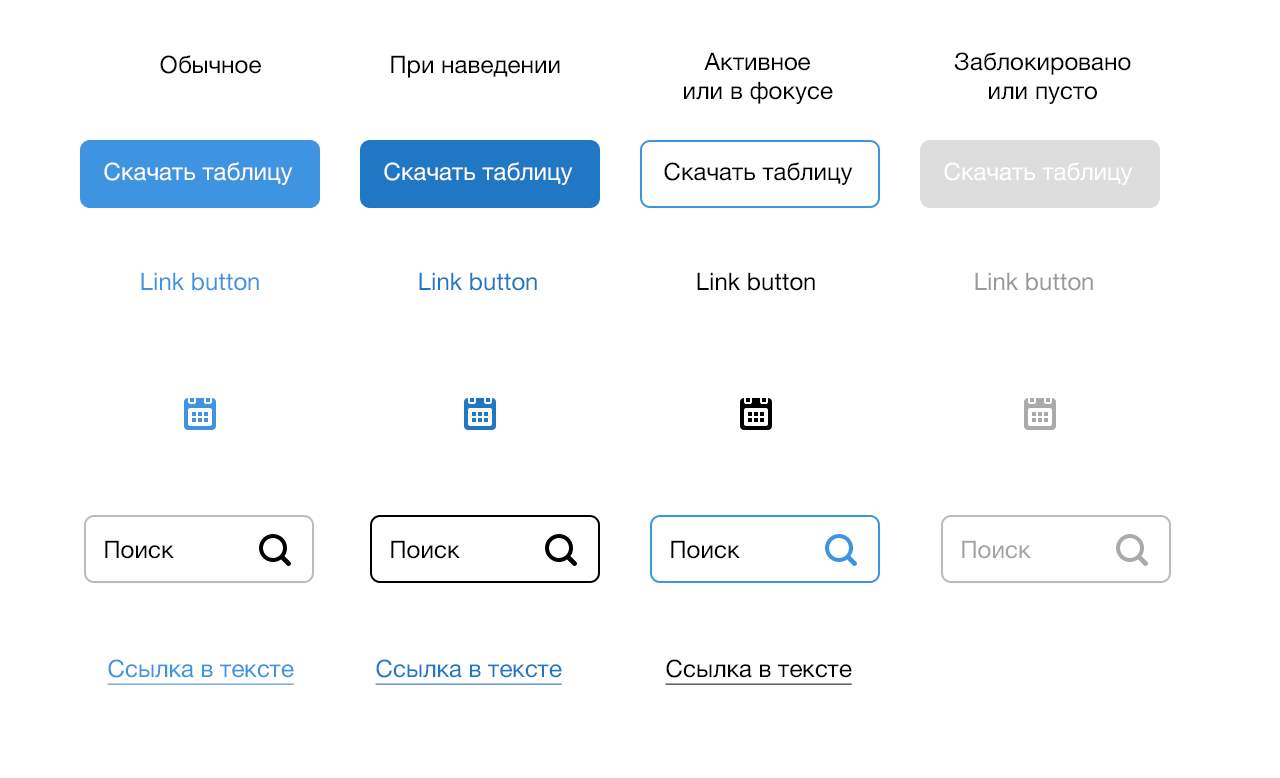
<style>
.page{position:relative;width:1280px;height:778px;background:#ffffff}
.page>*{position:absolute;margin:0}
.t1{font:12px "HelveticaNeue";color:#000000}
.t2{font:12px/40px "HelveticaNeue";color:#ffffff}
.t3{font:12px/40px "HelveticaNeue";color:#000000}
.t4{font:12px "HelveticaNeue";color:#3e94e0}
.t5{font:12px "HelveticaNeue";color:#2077c4}
.t6{font:12px "HelveticaNeue";color:#999999}
.t7{font:12px "HelveticaNeue";color:#a3a3a3}
.t8{font:12px "HelveticaNeue";color:#3e94e0;text-decoration:underline}
.t9{font:12px "HelveticaNeue";color:#2077c4;text-decoration:underline}
.t10{font:12px "HelveticaNeue";color:#000000;text-decoration:underline}
</style>
<div class="page">
<p class="t1" style="left:684px;top:52px;width:149px;height:52px;text-align:center">Активное<br>или в фокусе</p>
<p class="t1" style="left:954px;top:52px;width:177px;height:52px;text-align:center">Заблокировано<br>или пусто</p>
<p class="t1" style="left:160px;top:55px;width:101px;height:19px">Обычное</p>
<p class="t1" style="left:391px;top:55px;width:169px;height:23px">При наведении</p>
<p class="t2" style="left:104px;top:162px;width:189px;height:23px">Скачать таблицу</p>
<p class="t2" style="left:384px;top:162px;width:189px;height:23px">Скачать таблицу</p>
<p class="t3" style="left:664px;top:162px;width:189px;height:23px">Скачать таблицу</p>
<p class="t2" style="left:944px;top:162px;width:189px;height:23px">Скачать таблицу</p>
<p class="t4" style="left:141px;top:272px;width:118px;height:19px">Link button</p>
<p class="t5" style="left:419px;top:272px;width:118px;height:19px">Link button</p>
<p class="t1" style="left:697px;top:272px;width:118px;height:19px">Link button</p>
<p class="t6" style="left:975px;top:272px;width:118px;height:19px">Link button</p>
<p class="t1" style="left:105px;top:540px;width:69px;height:19px">Поиск</p>
<p class="t1" style="left:391px;top:540px;width:69px;height:19px">Поиск</p>
<p class="t1" style="left:671px;top:540px;width:69px;height:19px">Поиск</p>
<p class="t7" style="left:962px;top:540px;width:69px;height:19px">Поиск</p>
<p class="t8" style="left:107px;top:659px;width:187px;height:26px;text-align:center">Ссылка в тексте</p>
<p class="t9" style="left:375px;top:659px;width:187px;height:26px;text-align:center">Ссылка в тексте</p>
<p class="t10" style="left:665px;top:659px;width:187px;height:26px;text-align:center">Ссылка в тексте</p>
</div>
